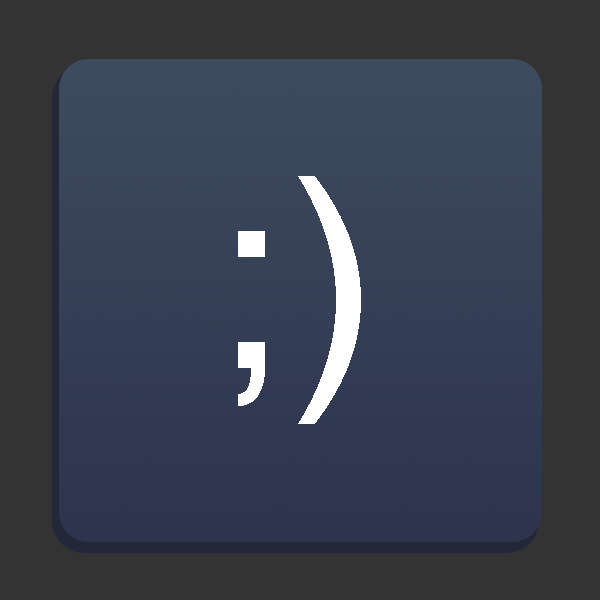
<style>
.page{position:relative;width:600px;height:600px;background:#333333}
.page>*{position:absolute;margin:0}
.t1{font:264.3px "MicrosoftSansSerif";color:#ffffff}
</style>
<div class="page">
<p class="t1" style="left:238px;top:176px;width:123px;height:248px">;)</p>
</div>
